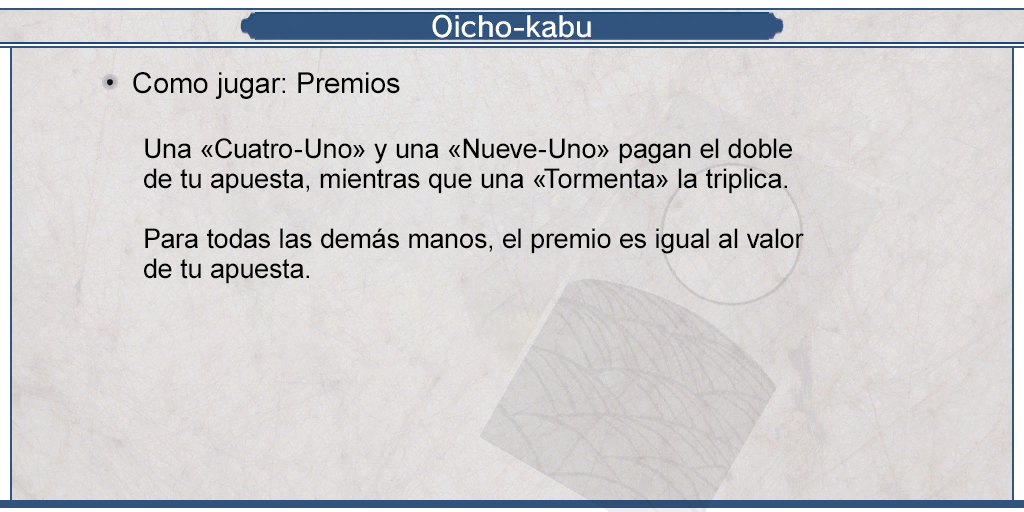
<style>
.page{position:relative;width:1024px;height:512px}
.page>*{position:absolute;margin:0}
.t1{font:29px "ArialMT";color:#000000}
.t2{font:27px/30px "ArialMT";color:#000000}
</style>
<div class="page">
<p class="t1" style="left:133px;top:72px;width:267px;height:27px">Como jugar: Premios</p>
<p class="t2" style="left:144px;top:138px;width:660px;height:146px">Una «Cuatro-Uno» y una «Nueve-Uno» pagan el doble <br>de tu apuesta, mientras que una «Tormenta» la triplica. <br><br>Para todas las demás manos, el premio es igual al valor <br>de tu apuesta.</p>
</div>
